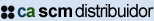
<style>
.page{position:relative;width:154px;height:21px;background:#d5e2f2}
.page>*{position:absolute;margin:0}
.t1{font:18px "ArialMT";letter-spacing:-0.05em;color:#000000}
.t2{font:18px "Arial-BoldMT";letter-spacing:-0.025em;color:#000000}
.t3{font:18px "Arial-BoldMT";letter-spacing:-0.05em;color:#0e4267}
.t4{font:18px "Arial-BoldMT";letter-spacing:-0.05em;color:#205b10}
</style>
<div class="page">
<p class="t1" style="left:75px;top:4px;width:79px;height:14px">distribuidor</p>
<p class="t2" style="left:17px;top:7px;width:55px;height:11px"><span class="t3">c</span><span class="t4">a </span>scm</p>
</div>
